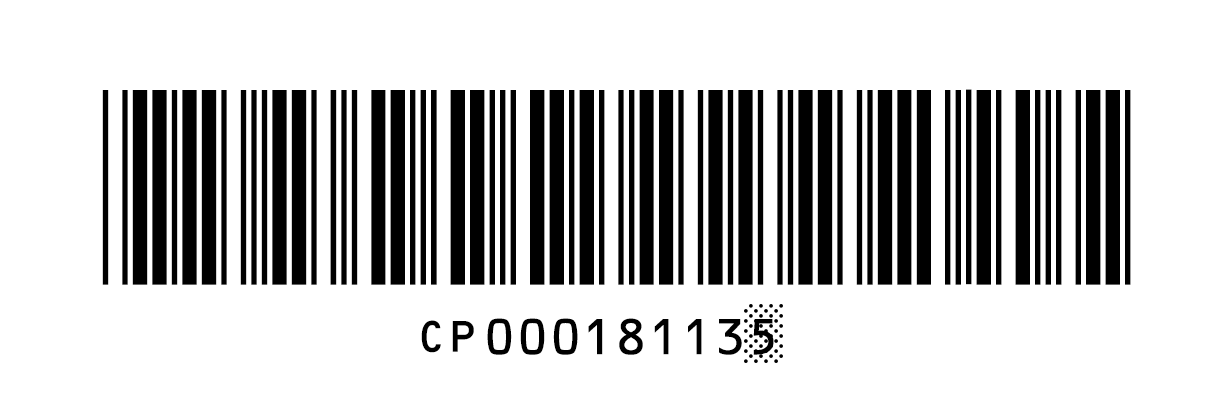
<style>
.page{position:relative;width:1228px;height:420px;background:#ffffff}
.page>*{position:absolute;margin:0}
.t1{font:259.4px "Free3of9";color:#000000;scale:0.8 1}
.t2{font:48.8px "OCRBEF-Regular";color:#000000}
.t3{font:45.8px "OCRBEF-Regular";color:#000000}
</style>
<div class="page">
<p class="t1" style="left:102px;top:89px;width:1029px;height:196px">*CP000181135*</p>
<p class="t2" style="left:487px;top:318px;width:287px;height:37px">000181135</p>
<p class="t3" style="left:421px;top:320px;width:53px;height:33px">CP</p>
</div>
